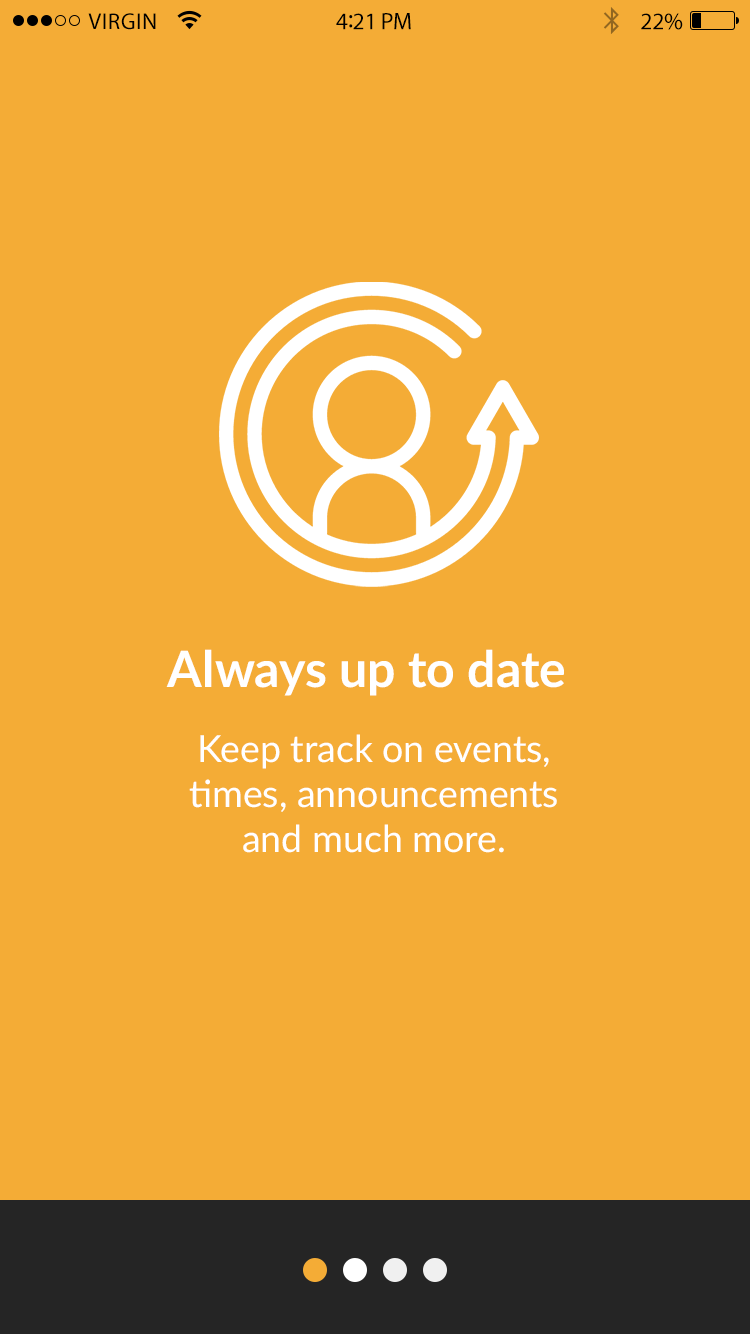
<style>
.page{position:relative;width:750px;height:1334px;background:#f4ac36}
.page>*{position:absolute;margin:0}
.t1{font:23px "MyriadPro-Regular";letter-spacing:0.02em;color:#000000}
.t2{font:24px "MyriadPro-Regular";letter-spacing:-0.02em;color:#000000}
.t3{font:26px "MyriadPro-Regular";letter-spacing:-0.02em;color:#000000}
.t4{font:50px "Lato-Bold";color:#ffffff}
.t5{font:37.5px "Lato-Regular";color:#ffffff}
</style>
<div class="page">
<p class="t1" style="left:88px;top:13px;width:68px;height:17px">VIRGIN</p>
<p class="t2" style="left:336px;top:13px;width:75px;height:17px">4<span class="t3">:</span>21 PM</p>
<p class="t2" style="left:641px;top:13px;width:42px;height:17px">22%</p>
<p class="t4" style="left:166px;top:649px;width:398px;height:47px">Always up to date</p>
<p class="t5" style="left:189px;top:734px;width:368px;height:119px;text-align:center">Keep track on events, <br>times, announcements <br>and much more.</p>
</div>
